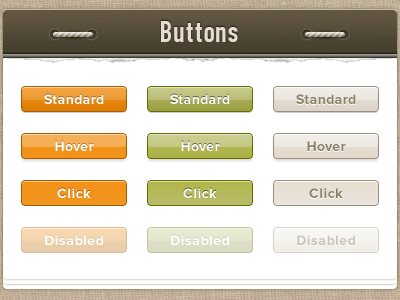
<style>
.page{position:relative;width:400px;height:300px;background:#ffffff}
.page>*{position:absolute;margin:0}
.t1{font:30px "PFDinTextCompPro-Medium";letter-spacing:0.025em;color:#e6dccf}
.t2{font:14px "ProximaNova-Bold";letter-spacing:0.025em;color:#ffffff}
.t3{font:14px "ProximaNova-Bold";letter-spacing:0.025em;color:#8a816a}
.t4{font:14px "ProximaNova-Bold";letter-spacing:0.025em;color:#c9c4b9}
</style>
<div class="page">
<p class="t1" style="left:161px;top:21px;width:77px;height:21px">Buttons</p>
<p class="t2" style="left:44px;top:94px;width:60px;height:10px">Standard</p>
<p class="t2" style="left:170px;top:94px;width:60px;height:10px">Standard</p>
<p class="t3" style="left:296px;top:94px;width:60px;height:10px">Standard</p>
<p class="t2" style="left:55px;top:141px;width:39px;height:10px">Hover</p>
<p class="t2" style="left:181px;top:141px;width:39px;height:10px">Hover</p>
<p class="t3" style="left:307px;top:141px;width:39px;height:10px">Hover</p>
<p class="t2" style="left:57px;top:188px;width:34px;height:10px">Click</p>
<p class="t2" style="left:183px;top:188px;width:34px;height:10px">Click</p>
<p class="t3" style="left:309px;top:188px;width:34px;height:10px">Click</p>
<p class="t2" style="left:45px;top:235px;width:58px;height:10px">Disabled</p>
<p class="t2" style="left:171px;top:235px;width:58px;height:10px">Disabled</p>
<p class="t4" style="left:297px;top:235px;width:58px;height:10px">Disabled</p>
</div>
